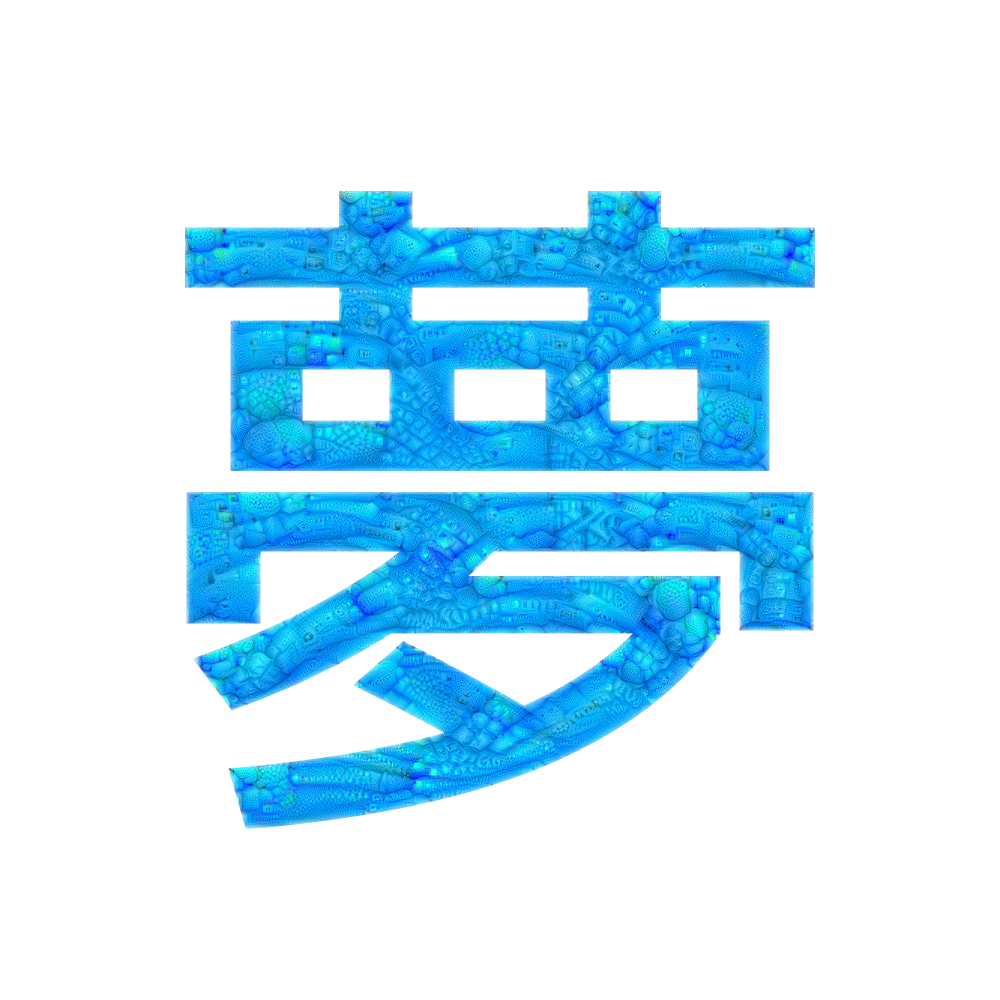
<style>
.page{position:relative;width:1000px;height:1000px;background:#ffffff}
.page>*{position:absolute;margin:0}
.t1{font:700px "Mplus1p-Medium"}
</style>
<div class="page">
<p class="t1" style="left:185px;top:191px;width:630px;height:639px">夢</p>
</div>
